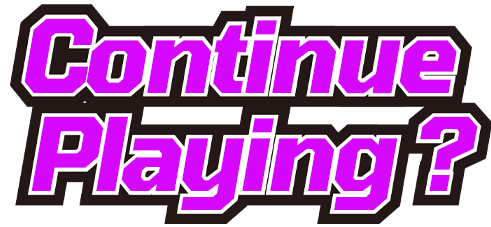
<style>
.page{position:relative;width:491px;height:227px;background:#ffffff}
.page>*{position:absolute;margin:0}
.t1{font:100.7px/98.5px "Tomorrow-BoldItalic";letter-spacing:-0.04em;color:#d507fe}
</style>
<div class="page">
<p class="t1" style="left:24px;top:18px;width:454px;height:192px;text-align:center">Continue<br> Playing ?</p>
</div>
